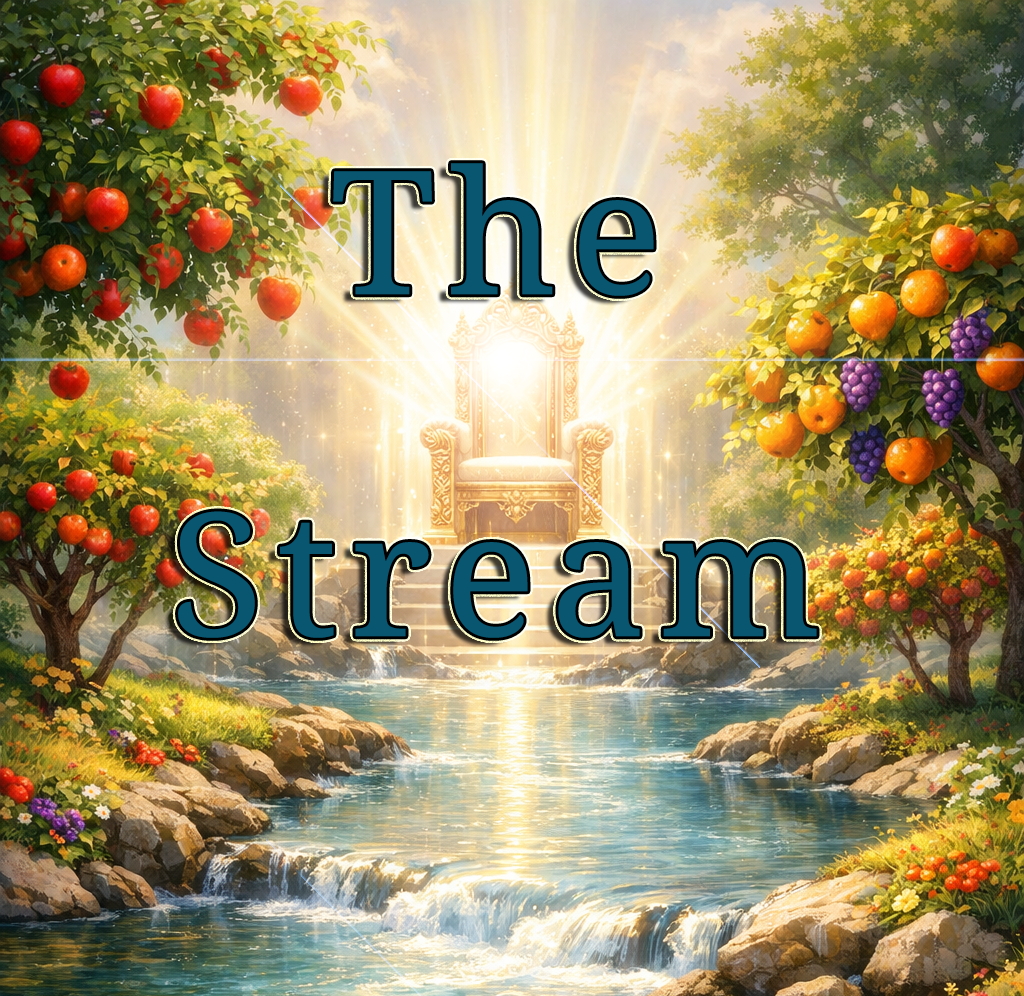
<style>
.page{position:relative;width:1024px;height:996px}
.page>*{position:absolute;margin:0}
.t1{font:294.6px/342.2px "NotoSerifArmenian-Regular";letter-spacing:0.05em;color:#08566f;font-weight:bold}
</style>
<div class="page">
<p class="t1" style="left:178px;top:163px;width:639px;height:475px;text-align:center">The<br>Stream</p>
</div>
